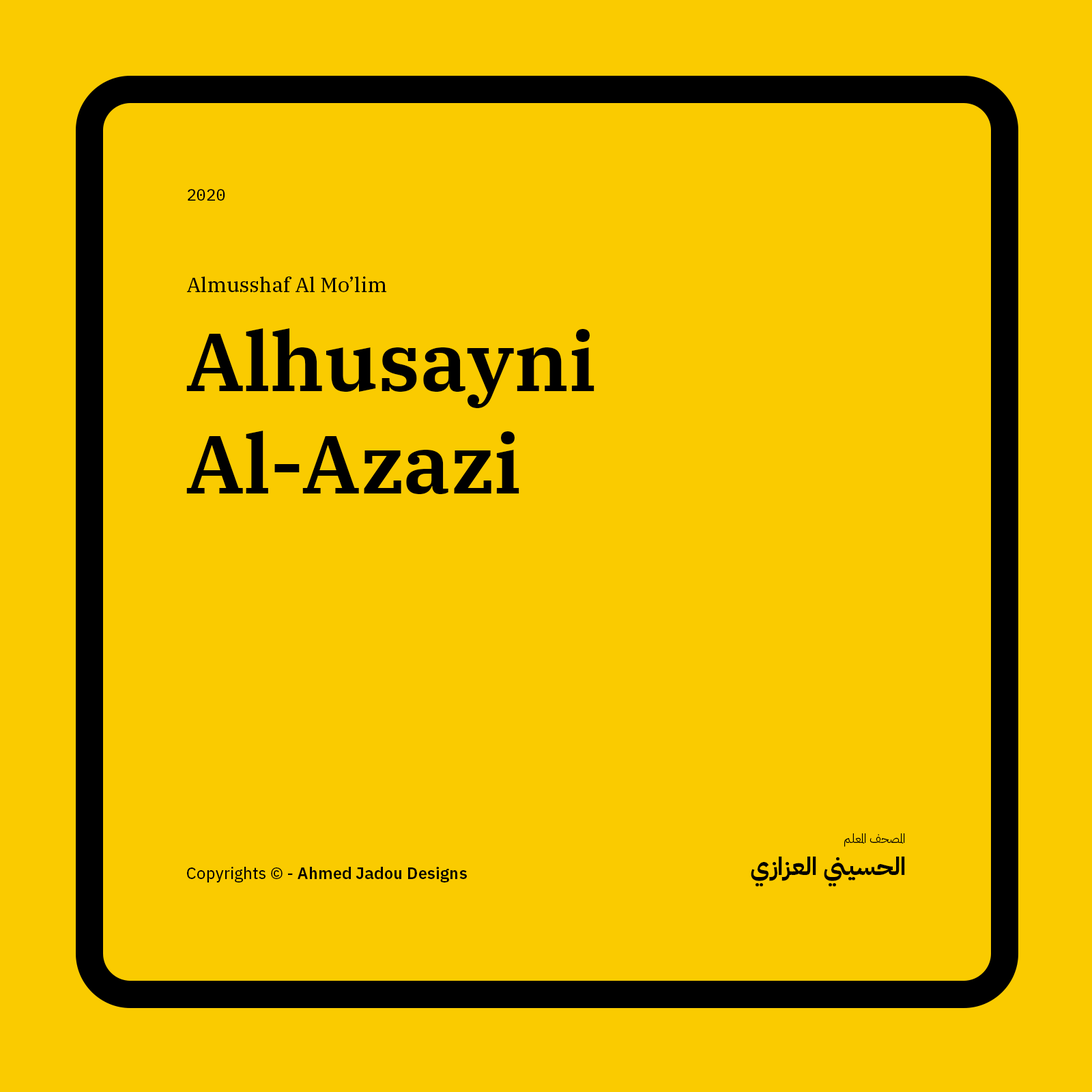
<style>
.page{position:relative;width:1092px;height:1092px;background:#facb00}
.page>*{position:absolute;margin:0}
.t1{font:16.4px "IBMPlexMono-Text";color:#000000}
.t2{font:20.5px "IBMPlexSerif-Text";color:#000000}
.t3{font:81.9px/102.7px "IBMPlexSerif-SemiBold";color:#000000}
.t4{font:12.3px "IBMPlexArabic-Light";color:#000000}
.t5{font:24.6px "IBMPlexArabic-Bold";color:#000000}
.t6{font:16.4px "IBMPlexSans-SemiBold";color:#000000}
.t7{font:16.4px "IBMPlexSans-Text";color:#000000}
</style>
<div class="page">
<p class="t1" style="left:188px;top:189px;width:37px;height:12px">2020</p>
<p class="t2" style="left:187px;top:276px;width:199px;height:16px">Almusshaf Al Mo’lim</p>
<p class="t3" style="left:186px;top:328px;width:408px;height:166px">Alhusayni Al-Azazi</p>
<p class="t4" style="left:844px;top:833px;width:61px;height:14px">المصحف المعلم</p>
<p class="t5" style="left:751px;top:857px;width:154px;height:30px">الحسيني العزازي</p>
<p class="t6" style="left:187px;top:867px;width:280px;height:15px"><span class="t7">Copyrights © - </span>Ahmed Jadou Designs</p>
</div>
